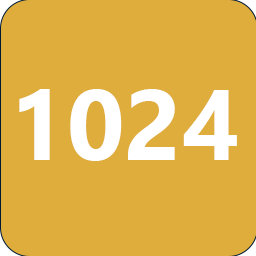
<style>
.page{position:relative;width:256px;height:256px;background:#dead3c}
.page>*{position:absolute;margin:0}
.t1{font:100px "LeelawadeeUI-Bold";color:#ffffff}
</style>
<div class="page">
<p class="t1" style="left:19px;top:89px;width:218px;height:72px">1024</p>
</div>
